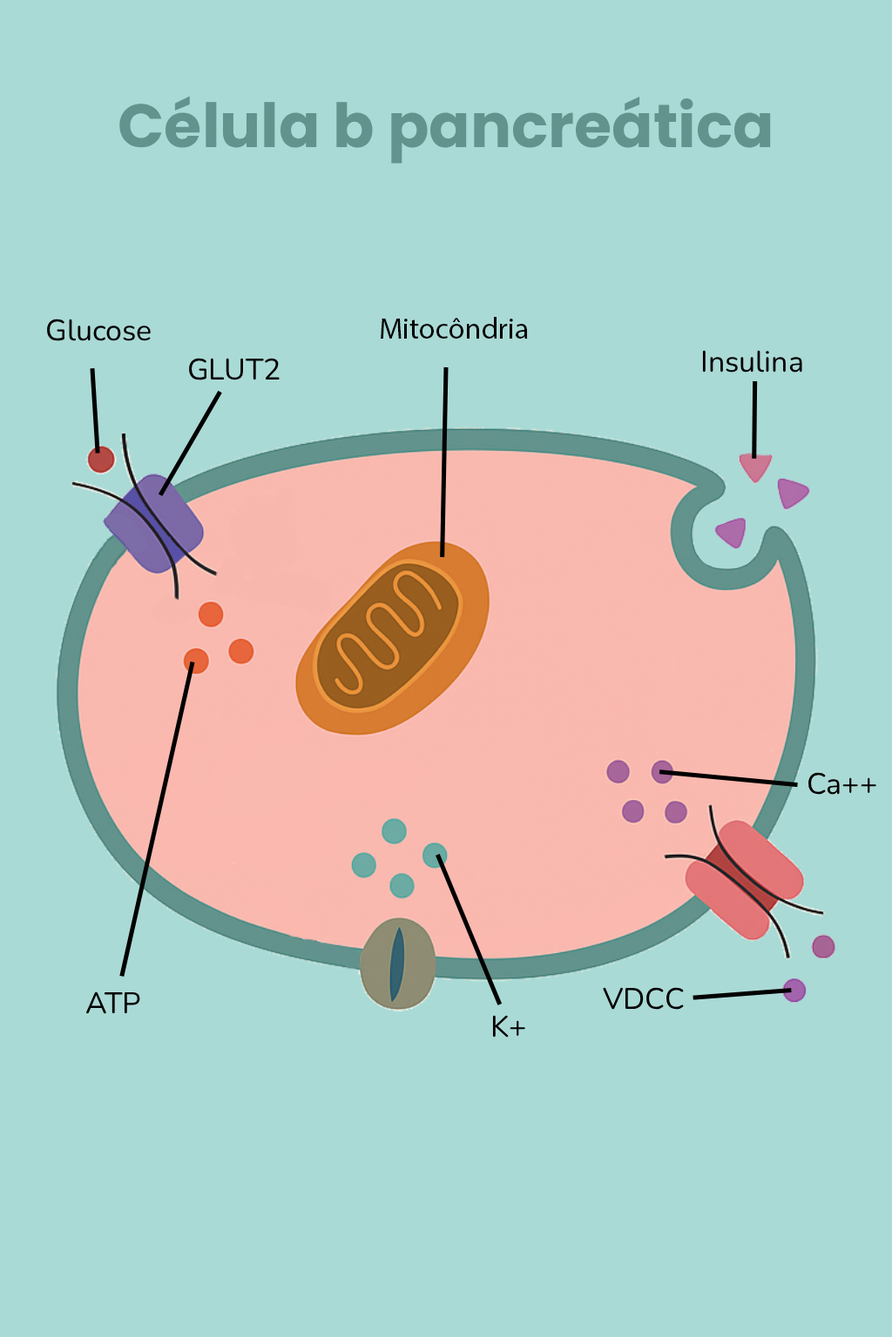
<style>
.page{position:relative;width:892px;height:1337px;background:#aadad6}
.page>*{position:absolute;margin:0}
.t1{font:60.9px "Poppins-Bold";color:#62938c}
.t2{font:29.6px "MyriadPro-Regular";color:#000000}
.t3{font:29.6px "Nunito-Regular";color:#000000}
</style>
<div class="page">
<p class="t1" style="left:119px;top:96px;width:652px;height:68px">Célula b pancreática</p>
<p class="t2" style="left:380px;top:317px;width:148px;height:22px">Mitocôndria</p>
<p class="t3" style="left:47px;top:319px;width:104px;height:22px">Glucose</p>
<p class="t3" style="left:702px;top:350px;width:100px;height:23px">Insulina</p>
<p class="t3" style="left:189px;top:358px;width:90px;height:22px">GLUT2</p>
<p class="t3" style="left:808px;top:772px;width:68px;height:23px">Ca++</p>
<p class="t3" style="left:603px;top:987px;width:81px;height:23px">VDCC</p>
<p class="t3" style="left:86px;top:992px;width:54px;height:22px">ATP</p>
<p class="t3" style="left:492px;top:1015px;width:33px;height:23px">K+</p>
</div>
